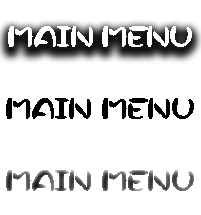
<style>
.page{position:relative;width:201px;height:215px;background:#ffffff}
.page>*{position:absolute;margin:0}
.t1{font:30px "Pikmin";letter-spacing:-0.005em;color:#ffffff}
.t2{font:30px "Pikmin";letter-spacing:-0.005em;color:#000000}
.t3{font:30px "Pikmin";letter-spacing:-0.005em}
</style>
<div class="page">
<p class="t1" style="left:8px;top:26px;width:184px;height:21px">MAIN MENU</p>
<p class="t2" style="left:6px;top:98px;width:188px;height:21px">MAIN MENU</p>
<p class="t3" style="left:6px;top:170px;width:188px;height:21px">MAIN MENU</p>
</div>
